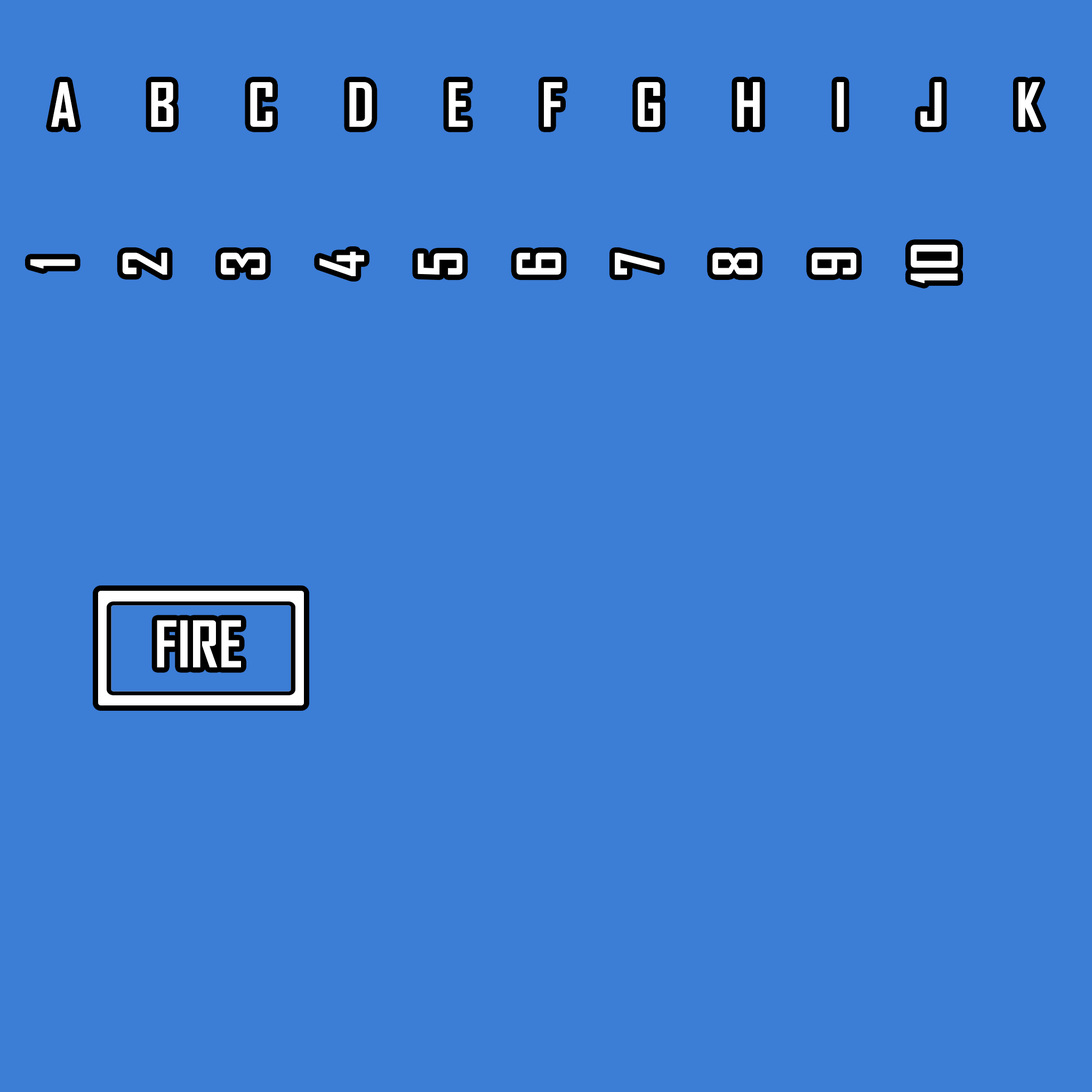
<style>
.page{position:relative;width:1092px;height:1092px;background:#3c7dd6}
.page>*{position:absolute;margin:0}
.t1{font:58.3px "AgencyFB-Bold";color:#ffffff}
.t2{font:61.3px "AgencyFB-Bold";color:#ffffff}
</style>
<div class="page">
<p class="t1" style="left:51px;top:82px;width:990px;height:45px">A      B      C      D      E      F      G      H      I      J      K</p>
<p class="t2" style="left:157px;top:620px;width:84px;height:48px">FIRE</p>
</div>
